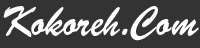
<style>
.page{position:relative;width:200px;height:48px;background:#333333}
.page>*{position:absolute;margin:0}
.t1{font:41.6px "BrushScriptStd";color:#ffffff;scale:0.88 1}
</style>
<div class="page">
<p class="t1" style="left:3px;top:6px;width:196px;height:35px">Kokoreh.Com</p>
</div>
